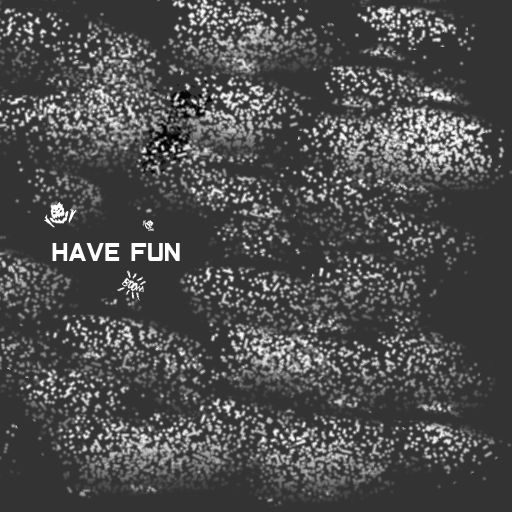
<style>
.page{position:relative;width:512px;height:512px;background:#333333}
.page>*{position:absolute;margin:0}
.t1{font:26.4px "Closeness-Regular";color:#ffffff}
</style>
<div class="page">
<p class="t1" style="left:52px;top:243px;width:128px;height:18px">Have fun</p>
</div>
